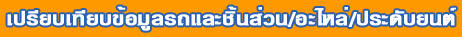
<style>
.page{position:relative;width:462px;height:37px;background:#ff9900}
.page>*{position:absolute;margin:0}
.t1{font:27px "PSL-DisplayBold";color:#ffffff;font-weight:bold;scale:1.2 1}
</style>
<div class="page">
<p class="t1" style="left:7px;top:6px;width:449px;height:25px">à»ÃÕÂºà·ÕÂº¢éÍÁÙÅÃ¶áÅÐªÔé¹ÊèÇ¹/ÍÐäËÅè/»ÃÐ´ÑºÂ¹µì</p>
</div>
